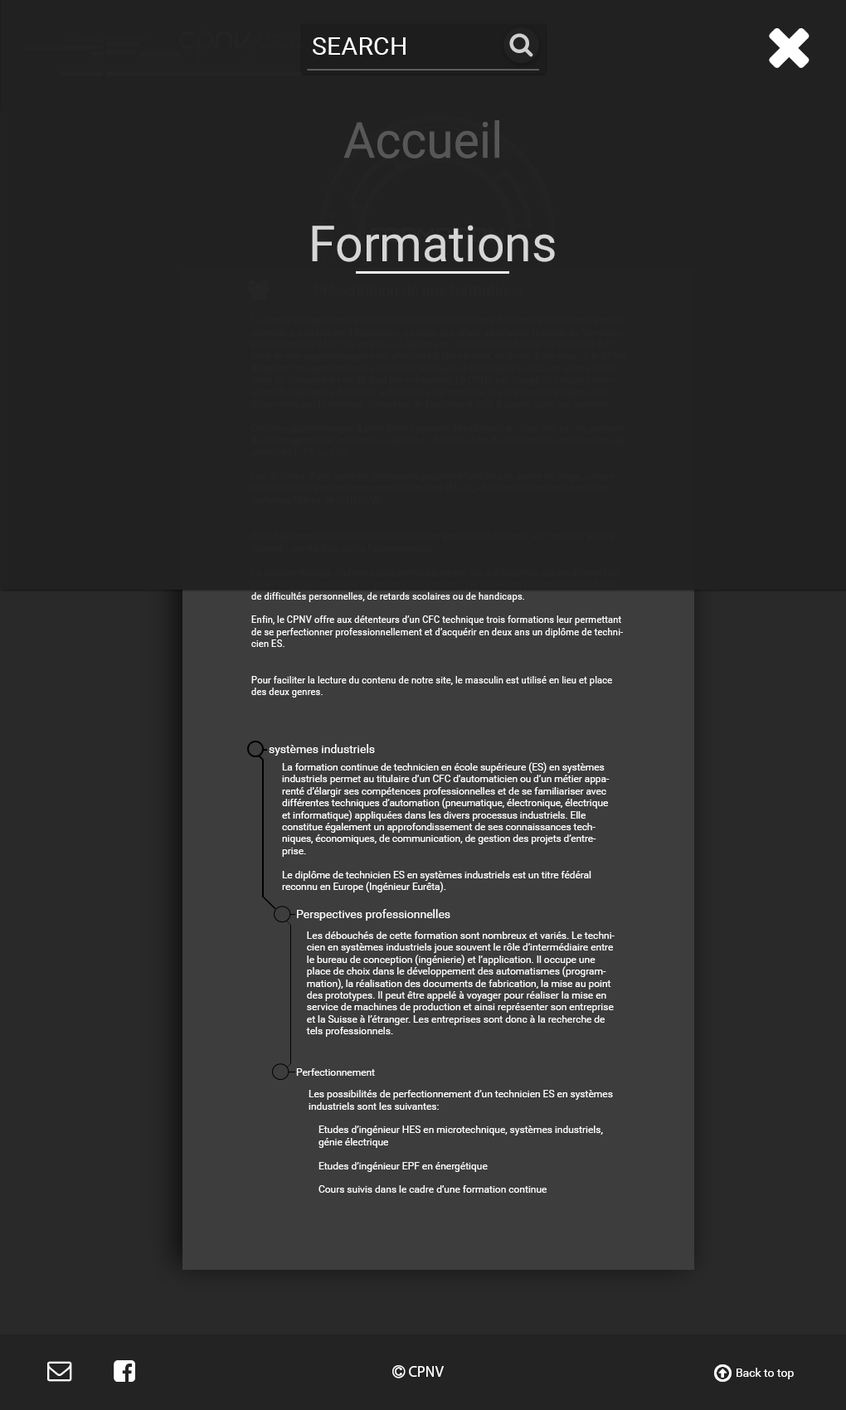
<style>
.page{position:relative;width:846px;height:1410px;background:#212121}
.page>*{position:absolute;margin:0}
.t1{font:24.9px "Roboto-Regular";letter-spacing:0.01em;color:#ffffff;text-transform:uppercase}
.t2{font:49.8px "Roboto-Regular";color:#575757}
.t3{font:49.8px "Roboto-Regular";color:#d6d6d6}
.t4{font:11.8px "Roboto-Regular";color:#fefefe}
.t5{font:10px "Roboto-Regular";color:#fefefe}
.t6{font:10.3px "Roboto-Regular";color:#fefefe;scale:0.96 1}
.t7{font:11.6px "Roboto-Regular";color:#fefefe}
</style>
<div class="page">
<p class="t1" style="left:313px;top:37px;width:93px;height:18px">search</p>
<p class="t2" style="left:343px;top:120px;width:156px;height:38px">Accueil</p>
<p class="t3" style="left:312px;top:225px;width:243px;height:37px">Formations</p>
<p class="t4" style="left:269px;top:744px;width:106px;height:11px">systèmes industriels</p>
<p class="t5" style="left:282px;top:762px;width:328px;height:130px">La formation continue de technicien en école supérieure (ES) en systèmes industriels permet au titulaire d’un CFC d’automaticien ou d’un métier apparenté d’élargir ses compétences professionnelles et de se familiariser avec différentes techniques d’automation (pneumatique, électronique, électrique et informatique) appliquées dans les divers processus industriels. Elle constitue également un approfondissement de ses connaissances techniques, économiques, de communication, de gestion des projets d’entreprise.<br><br>Le diplôme de technicien ES en systèmes industriels est un titre fédéral reconnu en Europe (Ingénieur Eurêta).</p>
<p class="t4" style="left:297px;top:909px;width:153px;height:11px">Perspectives professionnelles</p>
<p class="t5" style="left:306px;top:931px;width:308px;height:106px">Les débouchés de cette formation sont nombreux et variés. Le technicien en systèmes industriels joue souvent le rôle d’intermédiaire entre le bureau de conception (ingénierie) et l’application. Il occupe une place de choix dans le développement des automatismes (programmation), la réalisation des documents de fabrication, la mise au point des prototypes. Il peut être appelé à voyager pour réaliser la mise en service de machines de production et ainsi représenter son entreprise et la Suisse à l’étranger. Les entreprises sont donc à la recherche de tels professionnels.</p>
<p class="t6" style="left:296px;top:1068px;width:79px;height:8px">Perfectionnement</p>
<p class="t5" style="left:308px;top:1090px;width:305px;height:102px">Les possibilités de perfectionnement d’un technicien ES en systèmes industriels sont les suivantes:<br><br>    Etudes d’ingénieur HES en microtechnique, systèmes industriels, <br>    génie électrique<br><br>    Etudes d’ingénieur EPF en énergétique<br><br>    Cours suivis dans le cadre d’une formation continue</p>
<p class="t7" style="left:736px;top:1367px;width:58px;height:12px">Back to top</p>
</div>
